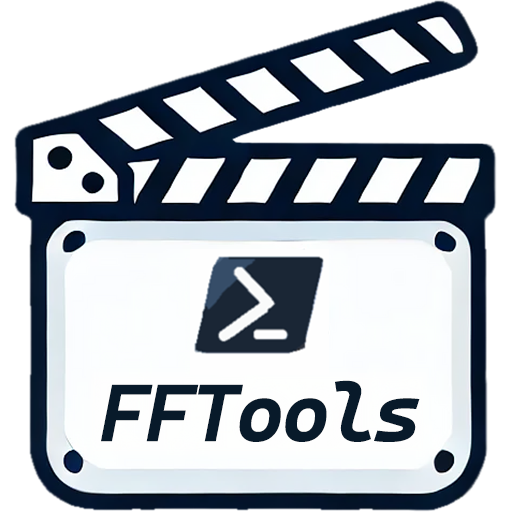
<style>
.page{position:relative;width:512px;height:512px;background:#ffffff}
.page>*{position:absolute;margin:0}
.t1{font:81.6px "CascadiaCode-BoldItalic";letter-spacing:-0.05em;color:#081a2a;scale:1.04 1}
</style>
<div class="page">
<p class="t1" style="left:101px;top:380px;width:319px;height:62px">FFTools</p>
</div>
